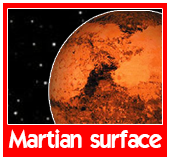
<style>
.page{position:relative;width:170px;height:160px;background:#ff0000}
.page>*{position:absolute;margin:0}
.t1{font:24px "ELEGANCE";color:#ffffff}
</style>
<div class="page">
<p class="t1" style="left:8px;top:129px;width:154px;height:19px">Martian surface</p>
</div>
